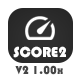
<style>
.page{position:relative;width:80px;height:80px;background:#ffffff}
.page>*{position:absolute;margin:0}
.t1{font:15px "Bauhaus93";color:#ffffff}
.t2{font:12px "Bauhaus93";color:#464646}
</style>
<div class="page">
<p class="t1" style="left:13px;top:46px;width:53px;height:12px">SCORE2</p>
<p class="t2" style="left:15px;top:65px;width:48px;height:10px">V2 1.00x</p>
</div>
